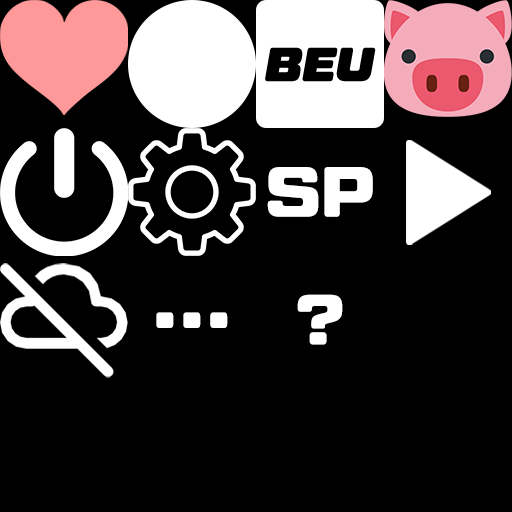
<style>
.page{position:relative;width:512px;height:512px;background:#000000}
.page>*{position:absolute;margin:0}
.t1{font:71px "TacticRound-Blk";color:#ffffff}
</style>
<div class="page">
<p class="t1" style="left:267px;top:167px;width:106px;height:50px">SP</p>
<p class="t1" style="left:297px;top:294px;width:46px;height:51px">?</p>
<p class="t1" style="left:156px;top:312px;width:72px;height:16px">...</p>
</div>
